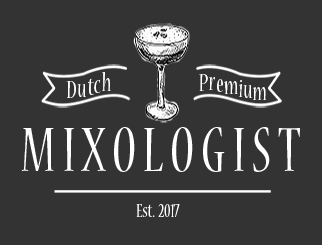
<style>
.page{position:relative;width:322px;height:245px;background:#333333}
.page>*{position:absolute;margin:0}
.t1{font:27.7px "NuevaStd-Cond";color:#ffffff;scale:0.82 1}
.t2{font:69.2px "NuevaStd-Cond";color:#ffffff;scale:0.82 1}
.t3{font:20.8px "NuevaStd-Cond";color:#ffffff;scale:0.82 1}
</style>
<div class="page">
<p class="t1" style="left:88px;top:78px;width:6px;height:17px">t</p>
<p class="t1" style="left:102px;top:72px;width:9px;height:19px">h</p>
<p class="t1" style="left:199px;top:74px;width:9px;height:17px">P</p>
<p class="t1" style="left:209px;top:77px;width:6px;height:13px">r</p>
<p class="t1" style="left:66px;top:81px;width:10px;height:17px">D</p>
<p class="t1" style="left:77px;top:84px;width:9px;height:13px">u</p>
<p class="t1" style="left:94px;top:80px;width:7px;height:13px">c</p>
<p class="t1" style="left:217px;top:79px;width:6px;height:13px">e</p>
<p class="t1" style="left:224px;top:81px;width:14px;height:13px">m</p>
<p class="t1" style="left:239px;top:80px;width:4px;height:17px">i</p>
<p class="t1" style="left:243px;top:85px;width:9px;height:13px">u</p>
<p class="t1" style="left:253px;top:87px;width:14px;height:13px">m</p>
<p class="t2" style="left:21px;top:127px;width:279px;height:45px">M I X O L O G I S T</p>
<p class="t3" style="left:136px;top:204px;width:44px;height:13px">Est.  2017</p>
</div>
